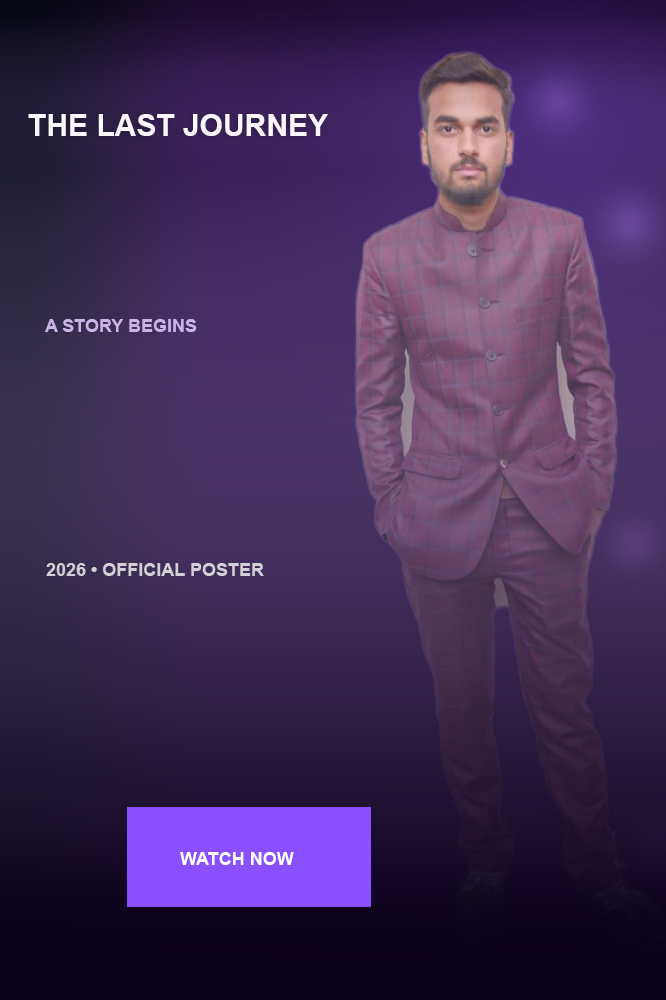
<style>
.page{position:relative;width:666px;height:1000px}
.page>*{position:absolute;margin:0}
.t1{font:30px "Arial-BoldMT";color:#ffffff}
.t2{font:18px "Arial-BoldMT";color:#c9b5e8}
.t3{font:18px "Arial-BoldMT";color:#d2d0d6}
.t4{font:18px "Arial-BoldMT";color:#ffffff}
</style>
<div class="page">
<p class="t1" style="left:28px;top:114px;width:300px;height:22px">THE LAST JOURNEY</p>
<p class="t2" style="left:45px;top:319px;width:152px;height:13px">A STORY BEGINS</p>
<p class="t3" style="left:46px;top:563px;width:218px;height:13px">2026 • OFFICIAL POSTER</p>
<p class="t4" style="left:180px;top:852px;width:114px;height:13px">WATCH NOW</p>
</div>
